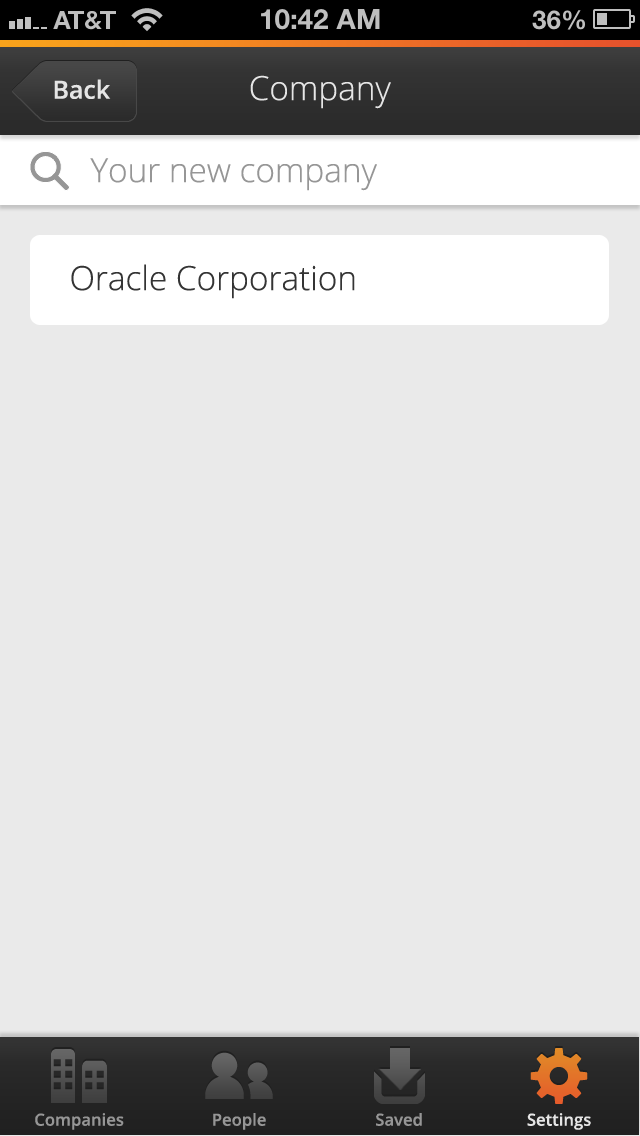
<style>
.page{position:relative;width:640px;height:1136px;background:#eaeaea}
.page>*{position:absolute;margin:0}
.t1{font:33.3px "OpenSans-Light";color:#e5e5e5}
.t2{font:25px "OpenSans-Semibold";color:#e5e5e5}
.t3{font:33.3px "OpenSans-Light";color:#969696}
.t4{font:33.3px "OpenSans-Light";color:#343434}
.t5{font:16.7px "OpenSans-Semibold";color:#969696}
.t6{font:16.7px "OpenSans-Semibold";color:#e5e5e5}
</style>
<div class="page">
<p class="t1" style="left:250px;top:75px;width:141px;height:34px">Company</p>
<p class="t2" style="left:54px;top:79px;width:57px;height:20px">Back</p>
<p class="t3" style="left:90px;top:158px;width:287px;height:33px">Your new company</p>
<p class="t4" style="left:71px;top:264px;width:284px;height:35px">Oracle Corporation</p>
<p class="t5" style="left:35px;top:1113px;width:89px;height:17px">Companies</p>
<p class="t5" style="left:213px;top:1113px;width:53px;height:17px">People</p>
<p class="t5" style="left:376px;top:1113px;width:46px;height:13px">Saved</p>
<p class="t6" style="left:527px;top:1113px;width:64px;height:17px">Settings</p>
</div>
